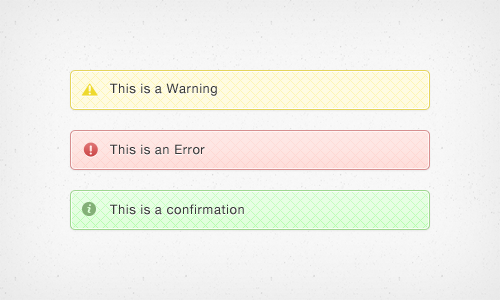
<style>
.page{position:relative;width:500px;height:300px}
.page>*{position:absolute;margin:0}
.t1{font:13px "HelveticaNeue";letter-spacing:0.04em;color:#373737}
</style>
<div class="page">
<p class="t1" style="left:110px;top:83px;width:107px;height:13px">This is a Warning</p>
<p class="t1" style="left:110px;top:144px;width:95px;height:11px">This is an Error</p>
<p class="t1" style="left:110px;top:204px;width:134px;height:11px">This is a confirmation</p>
</div>
